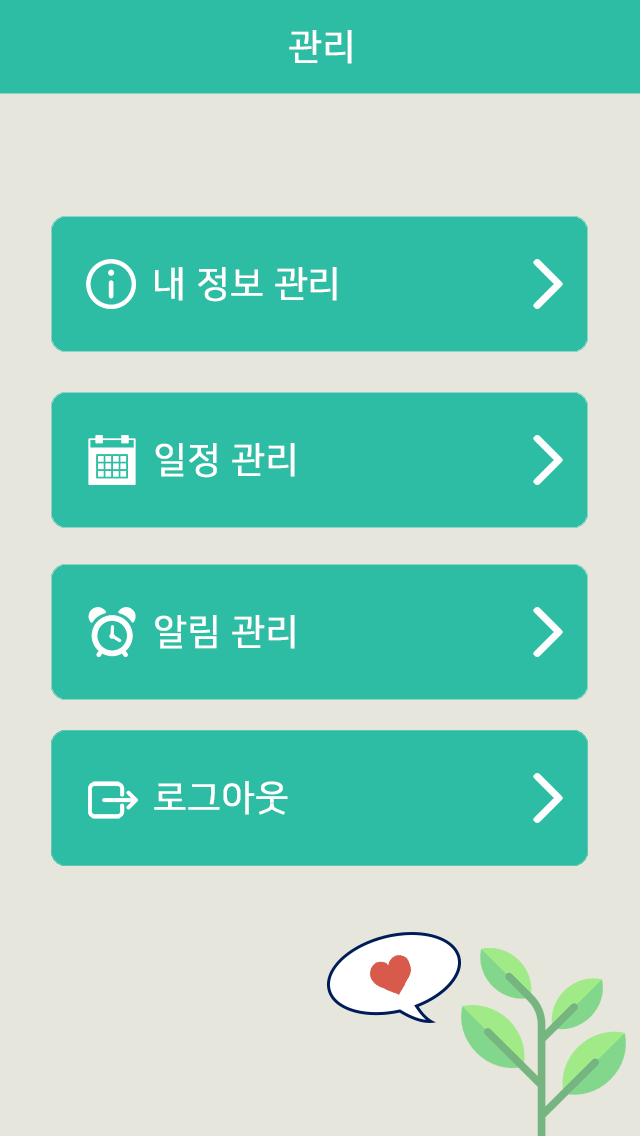
<style>
.page{position:relative;width:640px;height:1136px;background:#e6e6dc}
.page>*{position:absolute;margin:0}
.t1{font:36px "NanumSquareR";color:#ffffff;font-weight:bold}
</style>
<div class="page">
<p class="t1" style="left:289px;top:30px;width:63px;height:34px">관리</p>
<p class="t1" style="left:155px;top:267px;width:182px;height:35px">내 정보 관리</p>
<p class="t1" style="left:155px;top:443px;width:140px;height:35px">일정 관리</p>
<p class="t1" style="left:155px;top:615px;width:140px;height:34px">알림 관리</p>
<p class="t1" style="left:154px;top:781px;width:134px;height:34px">로그아웃</p>
</div>
